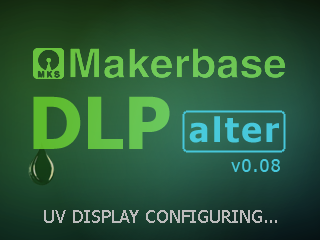
<style>
.page{position:relative;width:320px;height:240px}
.page>*{position:absolute;margin:0}
.t1{font:72px "Tahoma-Bold";color:#6bd22f}
.t2{font:34px "Tahoma-Bold";letter-spacing:0.075em;color:#48c9db}
.t3{font:18px "Tahoma";letter-spacing:0.075em;color:#47c7da}
.t4{font:18px "Tahoma";color:#bcbcbc}
</style>
<div class="page">
<p class="t1" style="left:33px;top:96px;width:137px;height:53px">DLP</p>
<p class="t2" style="left:189px;top:116px;width:90px;height:27px">alter</p>
<p class="t3" style="left:231px;top:159px;width:49px;height:13px">v0.08</p>
<p class="t4" style="left:44px;top:210px;width:233px;height:13px">UV DISPLAY CONFIGURING...</p>
</div>
